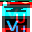
<style>
.page{position:relative;width:32px;height:32px}
.page>*{position:absolute;margin:0}
.t1{font:12.4px "LucidaSansUnicode";scale:1.35 1}
</style>
<div class="page">
<p class="t1" style="left:16px;top:11px;width:9px;height:11px;rotate:-1deg">U</p>
</div>
